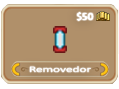
<style>
.page{position:relative;width:119px;height:89px;background:#b0906a}
.page>*{position:absolute;margin:0}
.t1{font:8.4px "Calibri";color:#ffffff}
.t2{font:6.3px "Calibri";color:#ffffff;scale:1.57 1}
</style>
<div class="page">
<p class="t1" style="left:76px;top:12px;width:18px;height:9px">$50</p>
<p class="t2" style="left:29px;top:66px;width:62px;height:7px">Removedor</p>
</div>
